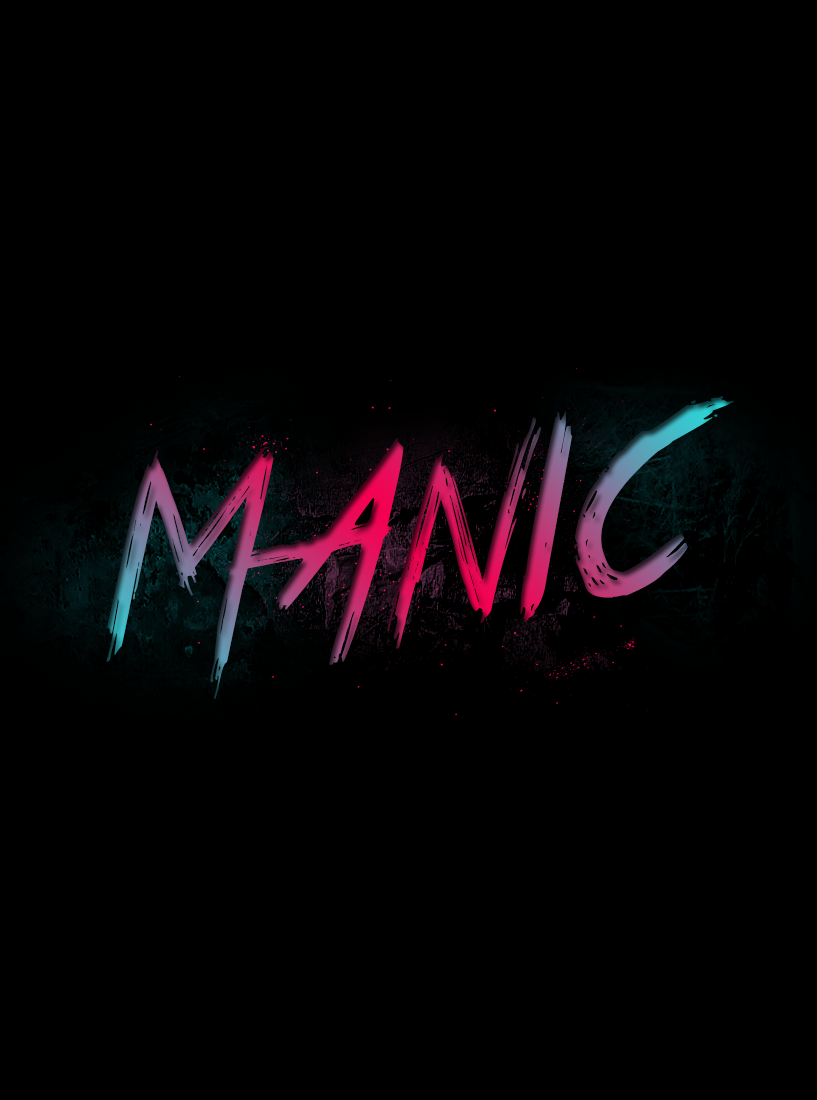
<style>
.page{position:relative;width:817px;height:1100px;background:#000000}
.page>*{position:absolute;margin:0}
.t1{font:190px "TrueLies";letter-spacing:-0.01em}
.t2{font:245px "TrueLies";letter-spacing:-0.01em}
.t3{font:200px "TrueLies";letter-spacing:-0.01em}
.t4{font:170px "TrueLies";letter-spacing:-0.01em}
</style>
<div class="page">
<p class="t1" style="left:106px;top:396px;width:628px;height:304px;rotate:-12deg"><span class="t2">M</span><span class="t3">A</span>NI<span class="t4">C</span></p>
</div>
